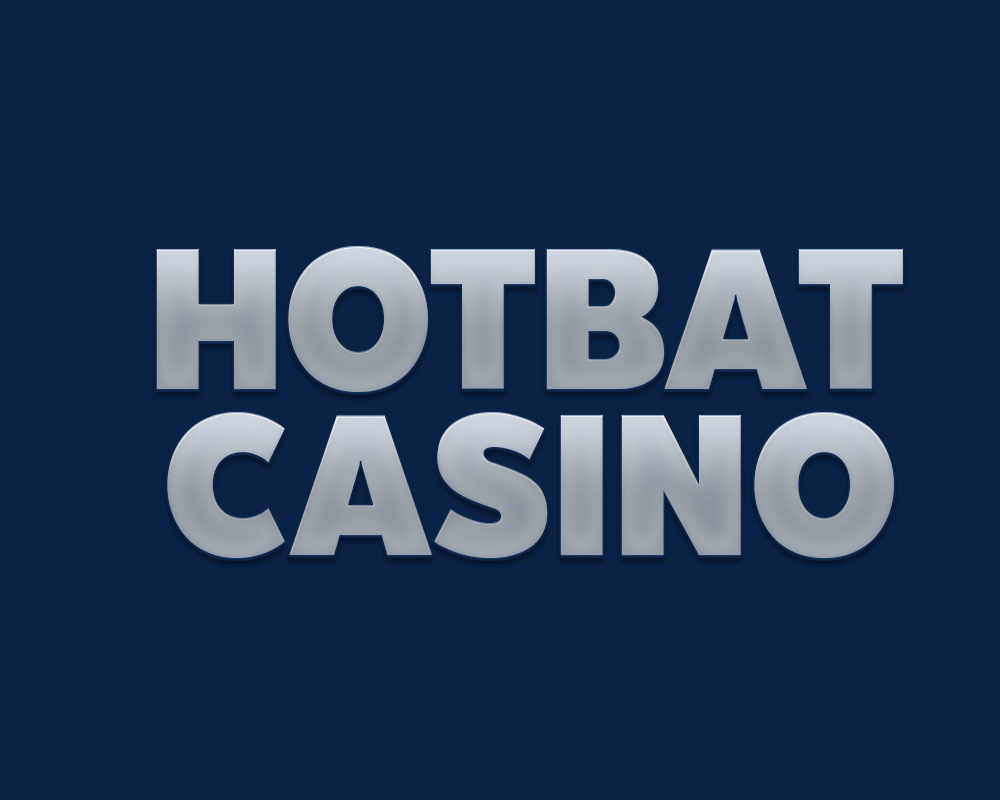
<style>
.page{position:relative;width:1000px;height:800px;background:#0b2246}
.page>*{position:absolute;margin:0}
.t1{font:200px "BoonTook-Ultra";scale:0.89 1}
.t2{font:200px "BoonTook-Ultra";color:#9ea5ac;scale:0.89 1}
</style>
<div class="page">
<p class="t1" style="left:156px;top:246px;width:747px;height:146px">HOTBAT</p>
<p class="t2" style="left:167px;top:412px;width:727px;height:146px">CASINO</p>
</div>
